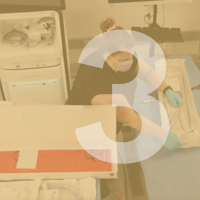
<style>
.page{position:relative;width:200px;height:200px}
.page>*{position:absolute;margin:0}
.t1{font:187.5px "PostGrotesk-Bold";color:#d2c7af}
</style>
<div class="page">
<p class="t1" style="left:75px;top:29px;width:95px;height:135px">3</p>
</div>
